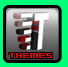
<style>
.page{position:relative;width:68px;height:67px;background:#00ff78}
.page>*{position:absolute;margin:0}
.t1{font:8px "04b09";color:#cb0e0d}
</style>
<div class="page">
<p class="t1" style="left:9px;top:53px;width:43px;height:5px">THEMES</p>
</div>
